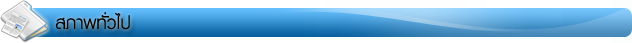
<style>
.page{position:relative;width:632px;height:43px;background:#ffffff}
.page>*{position:absolute;margin:0}
.t1{font:26px "KittithadaLight45F";color:#030303}
</style>
<div class="page">
<p class="t1" style="left:55px;top:12px;width:75px;height:18px">สภาพทั่วไป</p>
</div>
